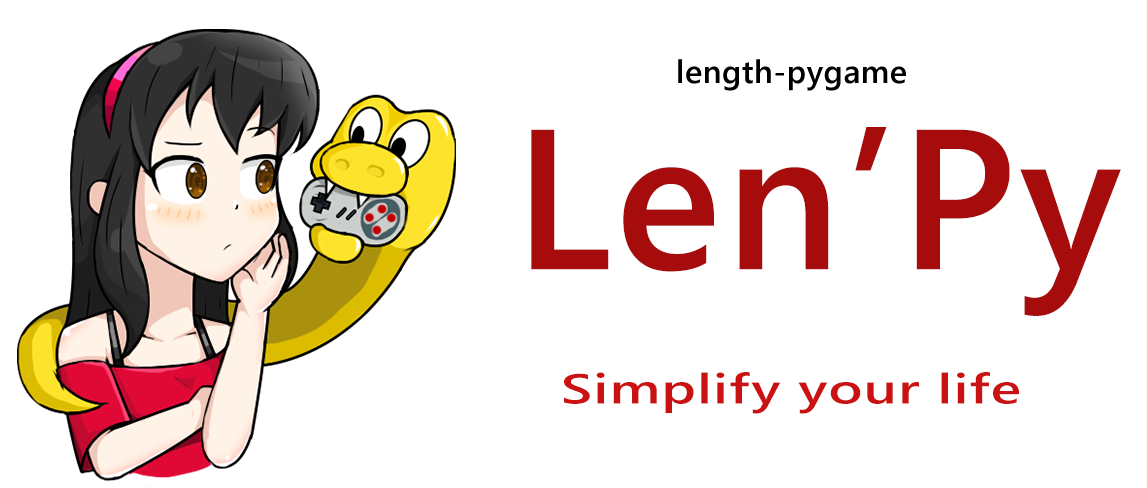
<style>
.page{position:relative;width:1147px;height:488px;background:#ffffff}
.page>*{position:absolute;margin:0}
.t1{font:32px "SegoeUI-SemiBold";letter-spacing:0.02em;color:#000000}
.t2{font:198.9px "SegoeUI-SemiBold";letter-spacing:0.02em;color:#a60c0c}
.t3{font:41.8px "SegoeUI-SemiBold";letter-spacing:0.02em;color:#ca1212;scale:1.37 1}
</style>
<div class="page">
<p class="t1" style="left:678px;top:59px;width:228px;height:32px">length-pygame</p>
<p class="t2" style="left:531px;top:127px;width:590px;height:189px">Len’Py</p>
<p class="t3" style="left:564px;top:372px;width:455px;height:42px">Simplify your life</p>
</div>
